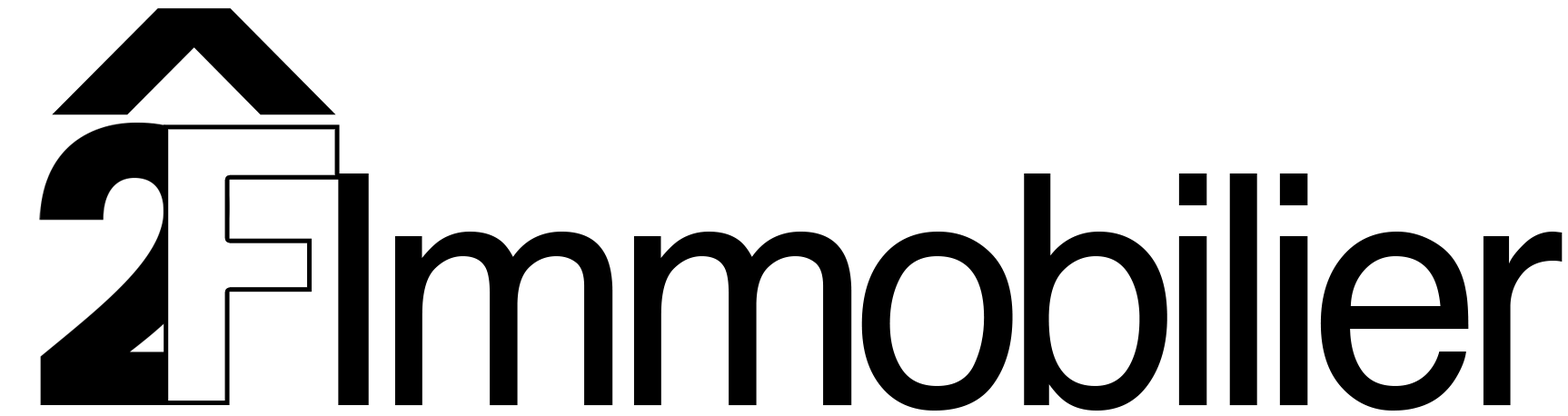
<style>
.page{position:relative;width:1568px;height:416px;background:#ffffff}
.page>*{position:absolute;margin:0}
.t1{font:197.1px "Poppins-Bold";color:#000000;scale:2.22 1}
.t2{font:322.3px "Helvetica";letter-spacing:-0.06em;color:#000000;scale:0.96 1}
</style>
<div class="page">
<p class="t1" style="left:52px;top:8px;width:284px;height:107px">^</p>
<p class="t2" style="left:338px;top:174px;width:1225px;height:237px">Immobilier</p>
</div>
